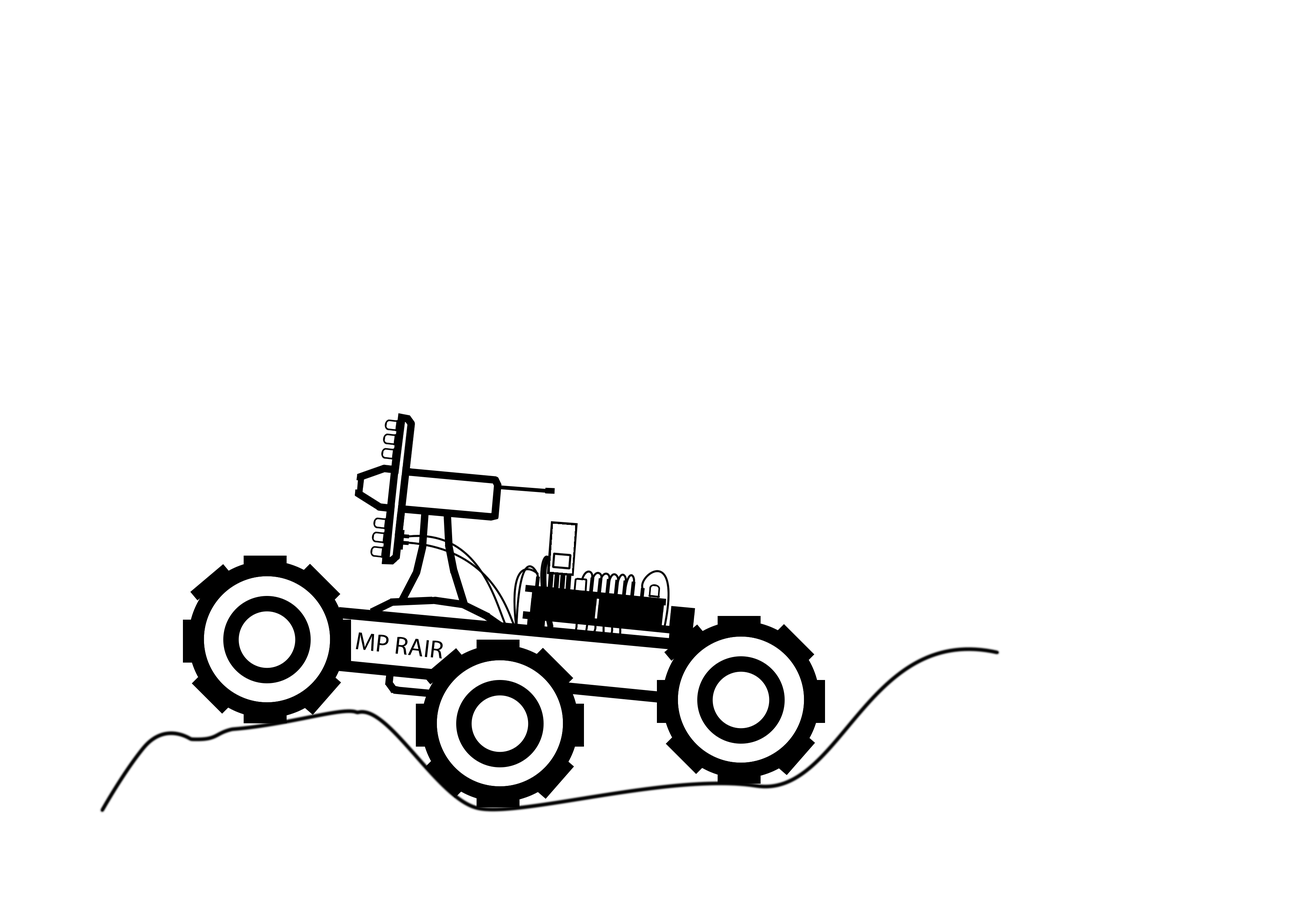
<style>
.page{position:relative;width:1299px;height:918px;background:#ffffff}
.page>*{position:absolute;margin:0}
.t1{font:25.1px "MyriadPro-Regular";color:#000000}
</style>
<div class="page">
<p class="t1" style="left:356px;top:632px;width:87px;height:27px;rotate:6deg">MP RAIR</p>
</div>
